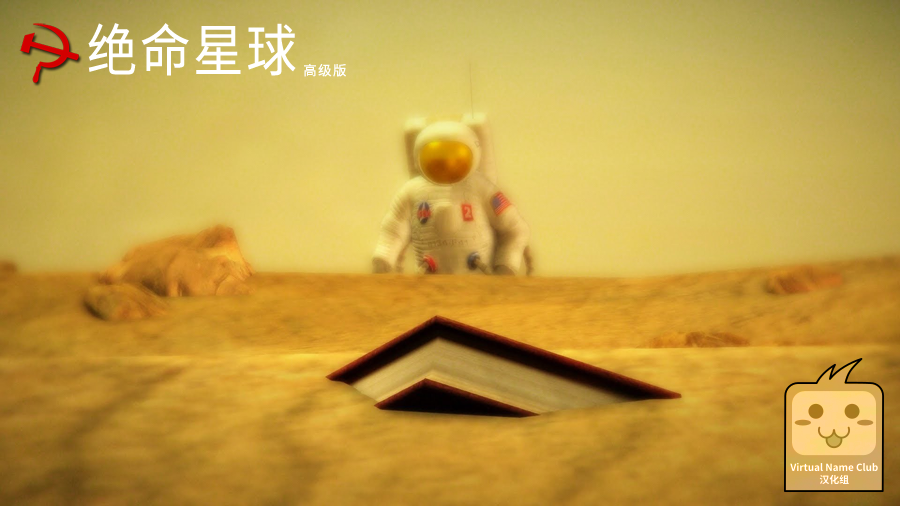
<style>
.page{position:relative;width:900px;height:506px}
.page>*{position:absolute;margin:0}
.t1{font:56.2px "SourceHanSansSC-Regular";letter-spacing:0.05em;color:#ffffff;scale:0.9 1}
.t2{font:13.5px "SourceHanSansSC-Regular";letter-spacing:0.1em;color:#ffffff}
</style>
<div class="page">
<p class="t1" style="left:88px;top:23px;width:208px;height:53px">绝命星球</p>
<p class="t2" style="left:304px;top:63px;width:42px;height:14px">高级版</p>
</div>
